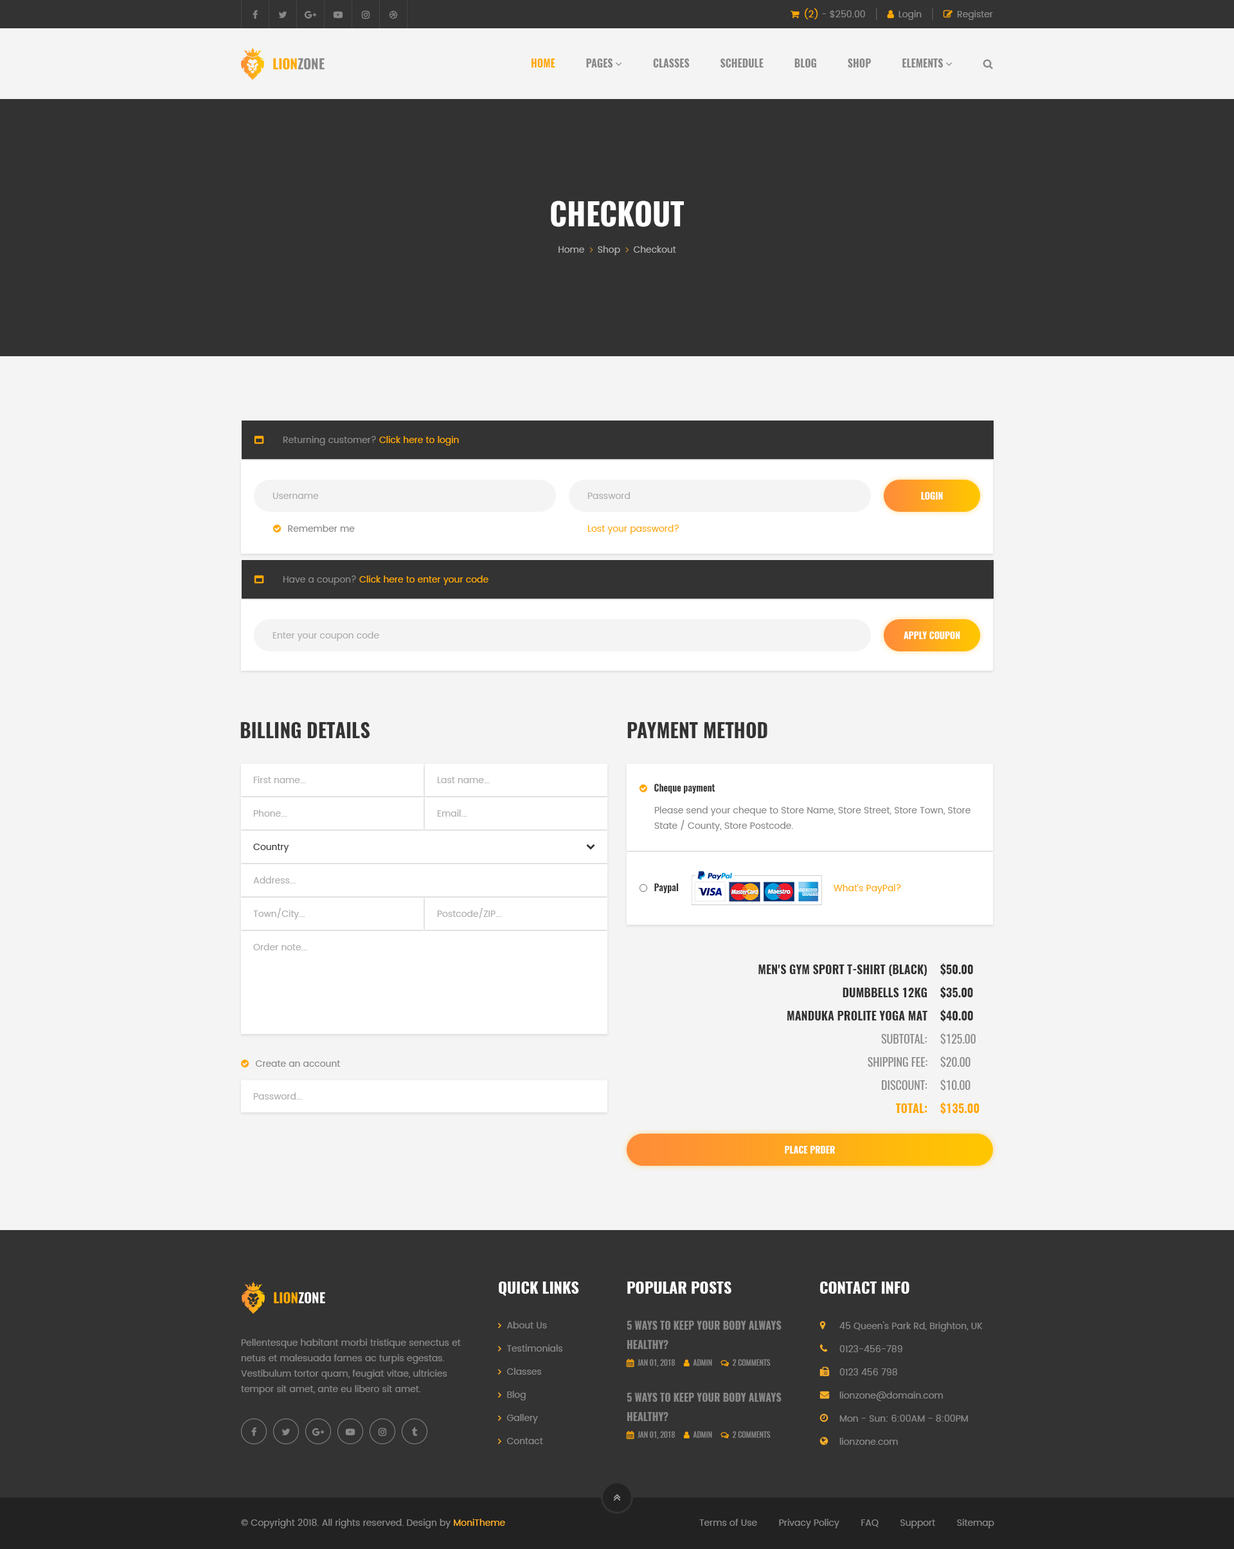
<style>
.page{position:relative;width:1234px;height:1549px;background:#f4f4f4}
.page>*{position:absolute;margin:0}
.t1{font:30.9px "Oswald-Bold";color:#ffffff;text-transform:uppercase}
.t2{font:9px "Poppins-Regular";color:#888888}
.t3{font:9px "Poppins-Regular";color:#ffa901}
.t4{font:9px "Poppins-Regular";color:#aeaeae}
.t5{font:9px "Oswald-Bold";color:#ffffff;text-transform:uppercase}
.t6{font:19.3px "Oswald-Bold";color:#333333;text-transform:uppercase}
.t7{font:9px/15.4px "Poppins-Regular";color:#888888}
.t8{font:9px "Poppins-Regular";color:#333333}
.t9{font:11.6px/23.1px "Oswald-Bold";color:#333333;text-transform:uppercase}
.t10{font:11.6px/23.1px "Oswald-Regular";color:#888888;text-transform:uppercase}
.t11{font:11.6px/23.1px "Oswald-Bold";color:#ffa901;text-transform:uppercase}
.t12{font:15.4px "Oswald-Bold";color:#ffffff;text-transform:uppercase}
.t13{font:9px/23.1px "Poppins-Regular";color:#888888}
.t14{font:9px "Poppins-Regular";color:#ffb027}
</style>
<div class="page">
<p class="t1" style="left:551px;top:201px;width:133px;height:26px">checkout</p>
<p class="t2" style="left:283px;top:436px;width:176px;height:10px">Returning customer? <span class="t3">Click here to login</span></p>
<p class="t4" style="left:273px;top:492px;width:46px;height:7px">Username</p>
<p class="t4" style="left:588px;top:492px;width:42px;height:7px">Password</p>
<p class="t5" style="left:921px;top:492px;width:22px;height:8px">login</p>
<p class="t3" style="left:588px;top:525px;width:91px;height:9px">Lost your password?</p>
<p class="t3" style="left:283px;top:575px;width:206px;height:10px"><span class="t2">Have a coupon? </span>Click here to enter your code</p>
<p class="t4" style="left:273px;top:631px;width:106px;height:10px">Enter your coupon code</p>
<p class="t5" style="left:904px;top:631px;width:56px;height:8px">apply coupon</p>
<p class="t6" style="left:240px;top:722px;width:130px;height:16px">billing details</p>
<p class="t6" style="left:627px;top:722px;width:141px;height:16px">payment method</p>
<p class="t4" style="left:253px;top:776px;width:53px;height:7px">First name...</p>
<p class="t4" style="left:437px;top:777px;width:53px;height:6px">Last name...</p>
<p class="t4" style="left:253px;top:809px;width:34px;height:7px">Phone...</p>
<p class="t4" style="left:437px;top:809px;width:30px;height:7px">Email...</p>
<p class="t7" style="left:654px;top:806px;width:317px;height:25px">Please send your cheque to Store Name, Store Street, Store Town, Store State / County, Store Postcode.</p>
<p class="t8" style="left:253px;top:843px;width:36px;height:9px">Country</p>
<p class="t4" style="left:253px;top:876px;width:43px;height:7px">Address...</p>
<p class="t3" style="left:834px;top:884px;width:67px;height:10px">What’s PayPal?</p>
<p class="t4" style="left:253px;top:908px;width:52px;height:11px">Town/City...</p>
<p class="t4" style="left:437px;top:908px;width:64px;height:10px">Postcode/ZIP...</p>
<p class="t4" style="left:253px;top:943px;width:54px;height:7px">Order note...</p>
<p class="t9" style="left:759px;top:964px;width:169px;height:149px;text-align:right">Men's Gym Sport T-Shirt (black)<br>Dumbbells 12kg<br>Manduka PROlite yoga mat<br><span class="t10">subtotal: <br>shipping fee:<br>discount: <br></span><span class="t11">total:</span></p>
<p class="t10" style="left:941px;top:963px;width:39px;height:151px"><span class="t9">$50.00<br>$35.00<br>$40.00<br></span>$125.00<br>$20.00<br>$10.00<br><span class="t11">$135.00</span></p>
<p class="t4" style="left:253px;top:1092px;width:49px;height:7px">Password...</p>
<p class="t5" style="left:785px;top:1146px;width:50px;height:7px">place prder</p>
<p class="t12" style="left:499px;top:1281px;width:80px;height:15px">quick links</p>
<p class="t12" style="left:627px;top:1281px;width:105px;height:12px">popular posts</p>
<p class="t12" style="left:820px;top:1281px;width:90px;height:12px">contact info</p>
<p class="t13" style="left:840px;top:1321px;width:143px;height:123px">45 Queen's Park Rd, Brighton, UK<br>0123-456-789<br>0123 456 798<br>lionzone@domain.com<br>Mon - Sun: 6:00AM - 8:00PM<br>lionzone.com</p>
<p class="t7" style="left:241px;top:1338px;width:220px;height:56px">Pellentesque habitant morbi tristique senectus et netus et malesuada fames ac turpis egestas. Vestibulum tortor quam, feugiat vitae, ultricies tempor sit amet, ante eu libero sit amet.</p>
<p class="t2" style="left:241px;top:1518px;width:264px;height:10px">© Copyright 2018. All rights reserved. Design by <span class="t14">MoniTheme</span></p>
<p class="t2" style="left:699px;top:1518px;width:296px;height:10px">Terms of Use        Privacy Policy        FAQ        Support        Sitemap</p>
</div>
